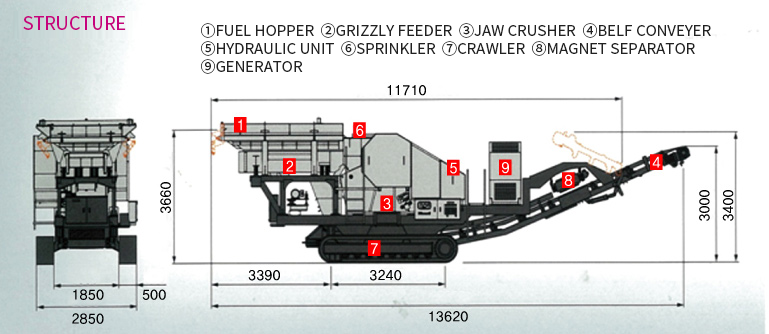
<style>
.page{position:relative;width:769px;height:334px;background:#ffffff}
.page>*{position:absolute;margin:0}
.t1{font:18px "NotoSansCJKkr-Regular";color:#c6037d;text-transform:uppercase}
.t2{font:15px "NotoSansCJKkr-Regular";color:#212121;text-transform:uppercase}
</style>
<div class="page">
<p class="t1" style="left:23px;top:16px;width:103px;height:14px">Structure</p>
<p class="t2" style="left:201px;top:23px;width:510px;height:51px">①Fuel Hopper  ②Grizzly Feeder  ③Jaw Crusher  ④Belf Conveyer<br>⑤Hydraulic Unit  ⑥Sprinkler  ⑦Crawler  ⑧Magnet Separator<br>⑨Generator</p>
</div>
